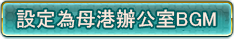
<style>
.page{position:relative;width:234px;height:39px}
.page>*{position:absolute;margin:0}
.t1{font:20px "MS-UIGothic";color:#fdeade}
</style>
<div class="page">
<p class="t1" style="left:16px;top:9px;width:200px;height:19px">設定為母港辦公室BGM</p>
</div>
